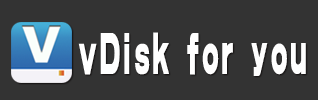
<style>
.page{position:relative;width:318px;height:100px;background:#333333}
.page>*{position:absolute;margin:0}
.t1{font:47.5px "HYb4gj";letter-spacing:0.112em;color:#ffffff;scale:0.48 1}
</style>
<div class="page">
<p class="t1" style="left:78px;top:32px;width:228px;height:44px">vDisk for you</p>
</div>
